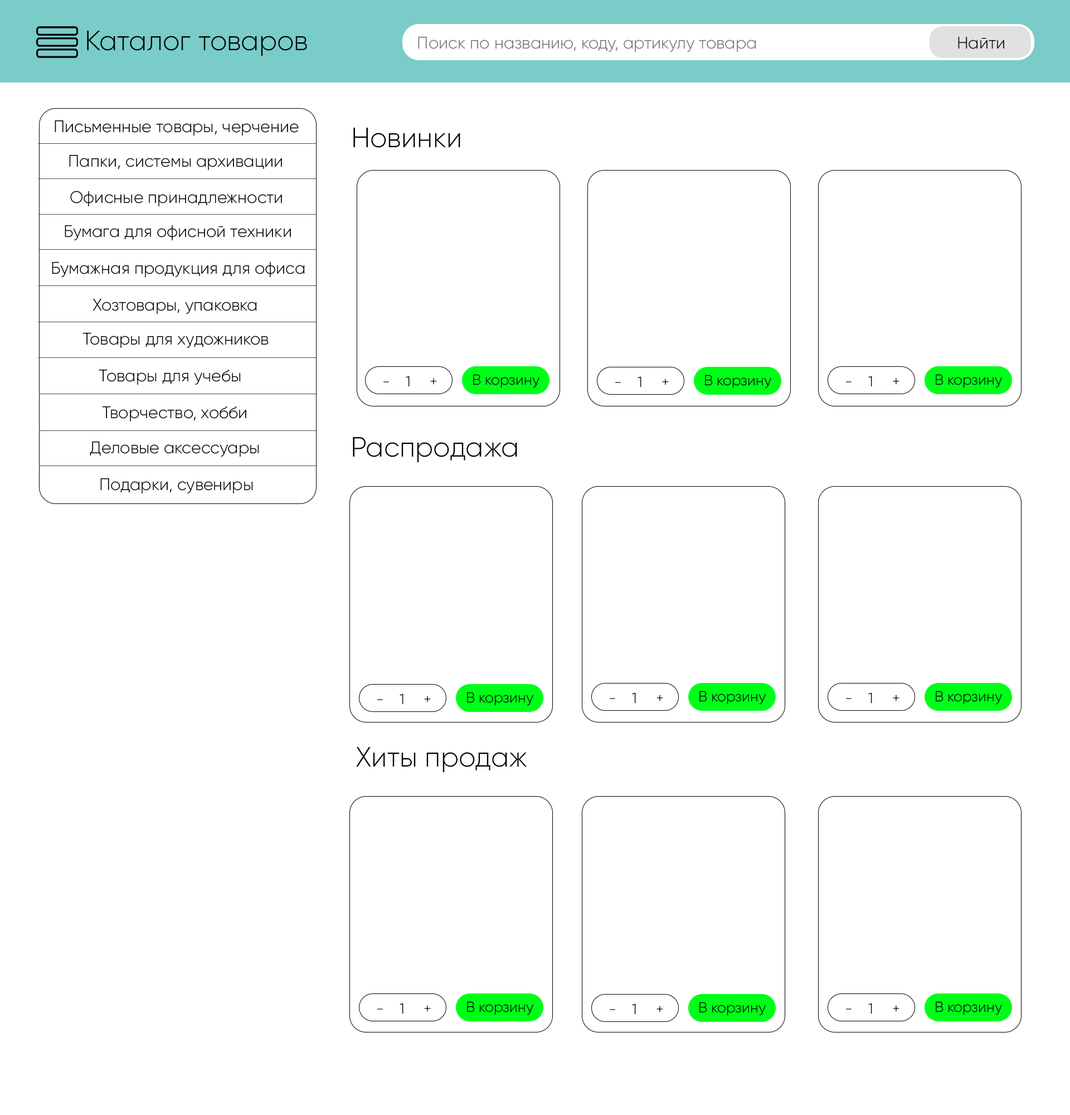
<style>
.page{position:relative;width:1070px;height:1115px;background:#ffffff}
.page>*{position:absolute;margin:0}
.t1{font:27.9px "Gilroy-Light";color:#000000}
.t2{font:16.7px "Gilroy-Light";color:#777777}
.t3{font:16.7px "Gilroy-Light";color:#090505}
.t4{font:16.7px "Gilroy-Light";color:#000000}
.t5{font:14.5px "Gilroy-Light";color:#000000}
</style>
<div class="page">
<p class="t1" style="left:87px;top:31px;width:220px;height:25px">Каталог товаров</p>
<p class="t2" style="left:418px;top:36px;width:338px;height:16px">Поиск по названию, коду, артикулу товара</p>
<p class="t3" style="left:958px;top:36px;width:46px;height:13px">Найти</p>
<p class="t4" style="left:55px;top:120px;width:244px;height:16px">Письменные товары, черчение</p>
<p class="t1" style="left:353px;top:128px;width:107px;height:20px">Новинки</p>
<p class="t4" style="left:69px;top:154px;width:213px;height:17px">Папки, системы архивации</p>
<p class="t4" style="left:70px;top:191px;width:212px;height:16px">Офисные принадлежности</p>
<p class="t4" style="left:65px;top:225px;width:226px;height:16px">Бумага для офисной техники</p>
<p class="t4" style="left:52px;top:261px;width:253px;height:17px">Бумажная продукция для офиса</p>
<p class="t4" style="left:93px;top:298px;width:164px;height:16px">Хозтовары, упаковка</p>
<p class="t4" style="left:82px;top:332px;width:187px;height:16px">Товары для художников</p>
<p class="t4" style="left:99px;top:369px;width:142px;height:16px">Товары для учебы</p>
<p class="t5" style="left:383px;top:376px;width:54px;height:11px">-    1     +</p>
<p class="t5" style="left:473px;top:374px;width:66px;height:14px">В корзину</p>
<p class="t5" style="left:615px;top:376px;width:54px;height:11px">-    1     +</p>
<p class="t5" style="left:705px;top:374px;width:66px;height:14px">В корзину</p>
<p class="t5" style="left:846px;top:376px;width:53px;height:11px">-    1     +</p>
<p class="t5" style="left:936px;top:374px;width:66px;height:14px">В корзину</p>
<p class="t4" style="left:102px;top:406px;width:144px;height:16px">Творчество, хобби</p>
<p class="t1" style="left:353px;top:437px;width:164px;height:25px">Распродажа</p>
<p class="t4" style="left:90px;top:441px;width:169px;height:16px">Деловые аксессуары</p>
<p class="t4" style="left:100px;top:478px;width:153px;height:16px">Подарки, сувениры</p>
<p class="t5" style="left:377px;top:693px;width:54px;height:11px">-    1     +</p>
<p class="t5" style="left:467px;top:692px;width:66px;height:13px">В корзину</p>
<p class="t5" style="left:610px;top:692px;width:53px;height:11px">-    1     +</p>
<p class="t5" style="left:699px;top:690px;width:67px;height:14px">В корзину</p>
<p class="t5" style="left:846px;top:692px;width:53px;height:11px">-    1     +</p>
<p class="t5" style="left:936px;top:690px;width:66px;height:14px">В корзину</p>
<p class="t1" style="left:356px;top:747px;width:171px;height:25px">Хиты продаж</p>
<p class="t5" style="left:467px;top:1001px;width:66px;height:14px">В корзину</p>
<p class="t5" style="left:699px;top:1001px;width:67px;height:14px">В корзину</p>
<p class="t5" style="left:936px;top:1001px;width:66px;height:14px">В корзину</p>
<p class="t5" style="left:377px;top:1002px;width:54px;height:12px">-    1     +</p>
<p class="t5" style="left:610px;top:1003px;width:53px;height:11px">-    1     +</p>
<p class="t5" style="left:846px;top:1002px;width:53px;height:12px">-    1     +</p>
</div>
